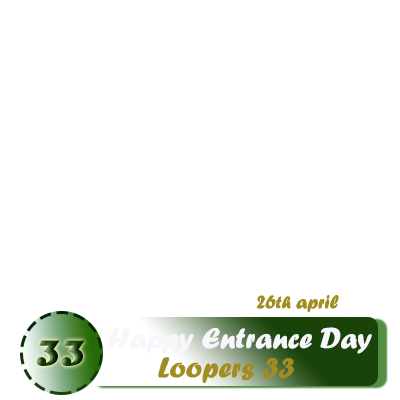
<style>
.page{position:relative;width:400px;height:400px;background:#ffffff}
.page>*{position:absolute;margin:0}
.t1{font:20px "ForteMT";color:#a08c1f}
.t2{font:18px "ForteMT";color:#a08c1f}
.t3{font:30px "ForteMT";color:#f7f7fb}
.t4{font:36px "Magneto-Bold"}
.t5{font:30px "ForteMT";color:#a08c1f}
</style>
<div class="page">
<p class="t1" style="left:256px;top:295px;width:83px;height:18px">26<span class="t2">th</span> april</p>
<p class="t3" style="left:107px;top:327px;width:265px;height:27px">Happy Entrance Day</p>
<p class="t4" style="left:36px;top:340px;width:49px;height:26px">33</p>
<p class="t5" style="left:158px;top:357px;width:136px;height:26px">Loopers 33</p>
</div>
